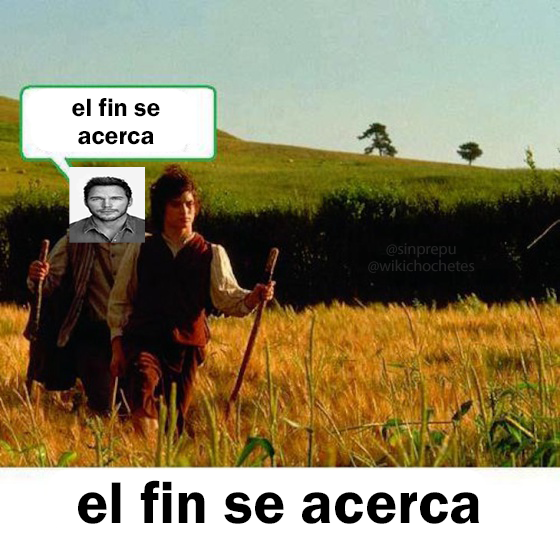
<style>
.page{position:relative;width:560px;height:545px}
.page>*{position:absolute;margin:0}
.t1{font:25.7px "FranklinGothic-Demi";color:#000000}
.t2{font:16px "MyriadPro-Regular";color:#242424}
.t3{font:60.9px "FranklinGothic-Demi";color:#000000}
</style>
<div class="page">
<p class="t1" style="left:72px;top:98px;width:88px;height:47px;text-align:center">el fin se<br>acerca</p>
<p class="t2" style="left:368px;top:243px;width:107px;height:30px;text-align:center">@sinprepu<br>@wikichochetes</p>
<p class="t3" style="left:78px;top:480px;width:402px;height:44px">el fin se acerca</p>
</div>
